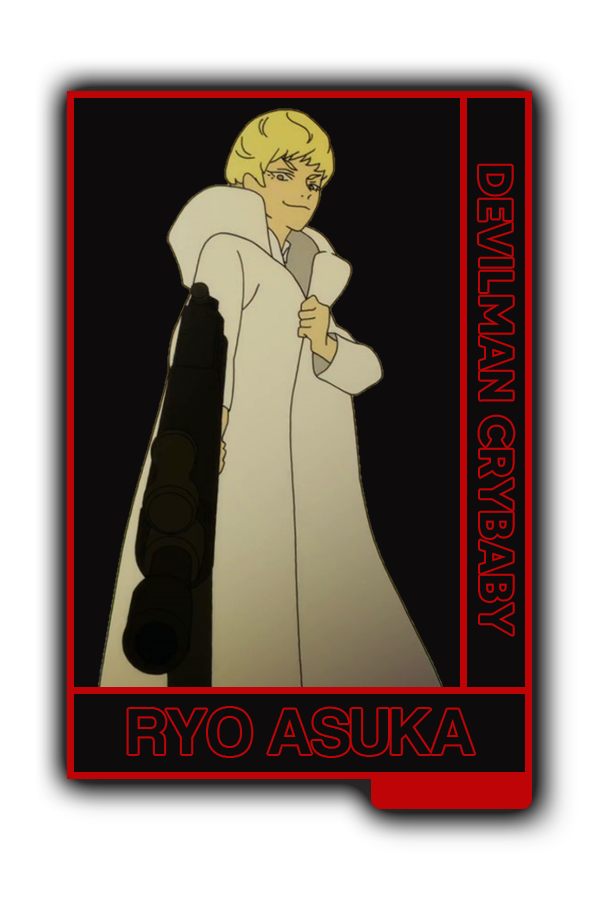
<style>
.page{position:relative;width:600px;height:900px;background:#0d0b0b}
.page>*{position:absolute;margin:0}
.t1{font:46.8px "MADETOMMY-Bold";color:#0d0b0b}
.t2{font:67.7px "CoolveticaRg-Regular";color:#0d0b0b}
</style>
<div class="page">
<p class="t1" style="left:479px;top:165px;width:35px;height:470px;rotate:90deg">DEVILMAN CRYBABY</p>
<p class="t2" style="left:128px;top:708px;width:347px;height:48px">RYO ASUKA</p>
</div>
